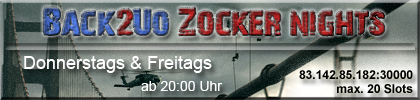
<style>
.page{position:relative;width:420px;height:100px}
.page>*{position:absolute;margin:0}
.t1{font:36px "28-Days-Later-Regular"}
.t2{font:18px "ArialMT";color:#ffffff}
.t3{font:12px "Arial-BoldMT";color:#000000}
.t4{font:14px "ArialMT";color:#ffffff}
</style>
<div class="page">
<p class="t1" style="left:43px;top:7px;width:342px;height:29px">Back2Uo Zocker nights</p>
<p class="t2" style="left:24px;top:56px;width:188px;height:17px">Donnerstags &amp; Freitags</p>
<p class="t3" style="left:299px;top:70px;width:114px;height:24px;text-align:right">83.142.85.182:30000<br>max. 20 Slots</p>
<p class="t4" style="left:141px;top:81px;width:82px;height:10px">ab 20:00 Uhr</p>
</div>
